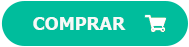
<style>
.page{position:relative;width:189px;height:47px;background:#00bd9c}
.page>*{position:absolute;margin:0}
.t1{font:18px "Tahoma-Bold";color:#f6f9f8}
</style>
<div class="page">
<p class="t1" style="left:33px;top:17px;width:93px;height:13px">COMPRAR</p>
</div>
